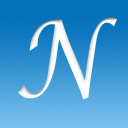
<style>
.page{position:relative;width:128px;height:128px}
.page>*{position:absolute;margin:0}
.t1{font:107.1px "LucidaCalligraphy-Italic";color:#fdfeff;scale:0.75 1}
</style>
<div class="page">
<p class="t1" style="left:18px;top:17px;width:99px;height:83px">N</p>
</div>
